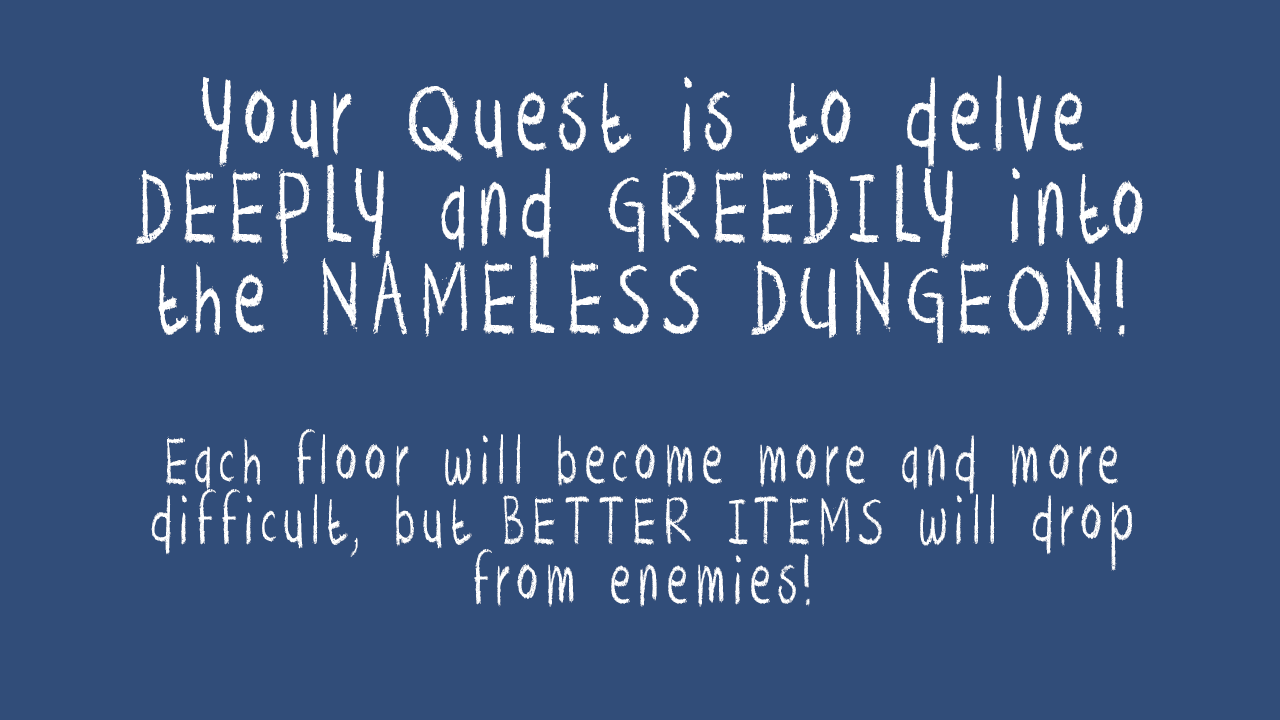
<style>
.page{position:relative;width:1280px;height:720px;background:#314d79}
.page>*{position:absolute;margin:0}
.t1{font:78.5px "DKCrayonCrumble";letter-spacing:0.159em;color:#ffffff;scale:0.64 1}
.t2{font:119px "DKCrayonCrumble";letter-spacing:0.159em;color:#ffffff;scale:0.64 1}
</style>
<div class="page">
<p class="t1" style="left:136px;top:75px;width:1007px;height:532px;text-align:center"><span class="t2">Your Quest is to delve DEEPLY and GREEDILY into the NAMELESS DUNGEON!<br><br></span>Each floor will become more and more<br>difficult, but BETTER ITEMS will drop from enemies!</p>
</div>
